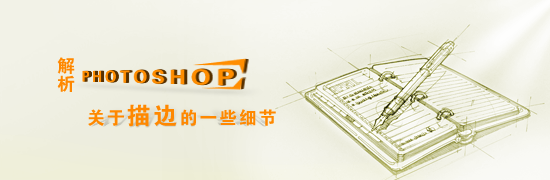
<style>
.page{position:relative;width:550px;height:180px}
.page>*{position:absolute;margin:0}
.t1{font:18px "FZDHTJW--GB1-0";color:#ff8800}
.t2{font:18px "FZDHTJW--GB1-0";letter-spacing:0.1em;color:#ff8800}
.t3{font:24px "FZDHTJW--GB1-0";letter-spacing:0.1em;color:#ff8800}
</style>
<div class="page">
<p class="t1" style="left:57px;top:57px;width:18px;height:35px">解析</p>
<p class="t2" style="left:88px;top:104px;width:188px;height:23px">关于<span class="t3">描边</span>的一些细节</p>
</div>
